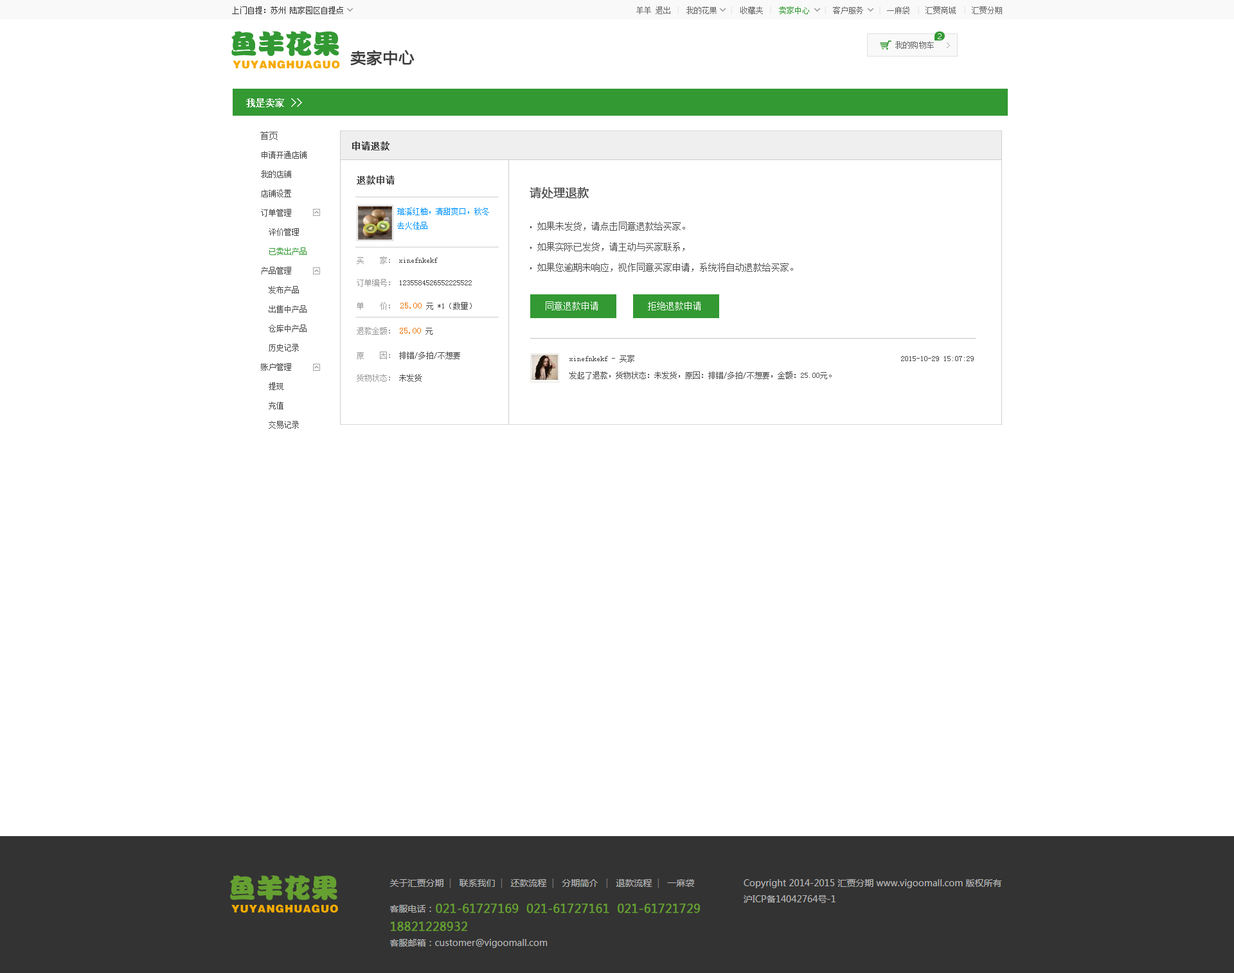
<style>
.page{position:relative;width:1234px;height:973px;background:#ffffff}
.page>*{position:absolute;margin:0}
.t1{font:9px "SimSun";color:#4b4b4b}
.t2{font:9px "SimSun";color:#3e3e3e;font-weight:bold}
.t3{font:7.7px/19.3px "SimSun";color:#4b4b4b}
.t4{font:7.7px/19.3px "SimSun";color:#339933}
.t5{font:9px "SimSun";color:#4b4b4b;font-weight:bold}
.t6{font:11.6px "MicrosoftYaHei";color:#4b4b4b;font-weight:bold}
.t7{font:7.7px/14.1px "SimSun";color:#0094ff}
.t8{font:9px/20.6px "SimSun";color:#4b4b4b}
.t9{font:11.6px/20.6px "AdobeHeitiStd-Regular";color:#4b4b4b}
.t10{font:7.7px/22.5px "SimSun";color:#4b4b4b}
.t11{font:7.7px/22.5px "SimSun";color:#9a9a9a}
.t12{font:7.7px/25.1px "SimSun";color:#9a9a9a}
.t13{font:9px/25.1px "SimSun";color:#ee7000}
.t14{font:7.7px/25.1px "SimSun";color:#4b4b4b}
.t15{font:9px "SimSun";color:#ffffff}
.t16{font:7.7px/16.7px "SimSun";color:#4b4b4b}
</style>
<div class="page">
<p class="t1" style="left:260px;top:131px;width:18px;height:9px">首页</p>
<p class="t2" style="left:352px;top:141px;width:38px;height:9px">申请退款</p>
<p class="t3" style="left:261px;top:151px;width:46px;height:278px">申请开通店铺<br>我的店铺<br>店铺设置<br>订单管理<br>  评价管理<br>  <span class="t4">已卖出产品<br></span>产品管理<br>  发布产品<br>  出售中产品<br>  仓库中产品<br>  历史记录<br>账户管理<br>  提现<br>  充值<br>  交易记录</p>
<p class="t5" style="left:357px;top:176px;width:38px;height:8px">退款申请</p>
<p class="t6" style="left:530px;top:187px;width:59px;height:12px">请处理退款</p>
<p class="t7" style="left:397px;top:208px;width:92px;height:22px">琯溪红柚，清甜爽口，秋冬<br>去火佳品</p>
<p class="t8" style="left:537px;top:222px;width:256px;height:50px">如果未发货，请点击同意退款给买家。<br>如果实际已发货，请主动与买家联系，<br>如果您逾期未响应，视作同意买家申请，系统将自动退款给买家。</p>
<p class="t9" style="left:530px;top:226px;width:2px;height:43px">.<br>.<br>.</p>
<p class="t10" style="left:357px;top:256px;width:115px;height:126px"><span class="t11">买    家：</span> xinefnkekf<br><span class="t11">订单编号：</span> 1235584526552225522<br><span class="t12">单    价： </span><span class="t13">25.00</span><span class="t14"> 元 *1（数量）<br></span><span class="t12">退款金额： </span><span class="t13">25.00 </span><span class="t14">元<br></span><span class="t11">原    因：</span> 排错/多拍/不想要<br><span class="t11">货物状态：</span> 未发货</p>
<p class="t15" style="left:546px;top:302px;width:52px;height:8px">同意退款申请</p>
<p class="t15" style="left:648px;top:302px;width:53px;height:8px">拒绝退款申请</p>
<p class="t16" style="left:570px;top:355px;width:404px;height:24px">xinefnkekf - 买家                                                                     2015-10-29 15:07:29<br>发起了退款，货物状态：未发货，原因：排错/多拍/不想要，金额：25.00元。</p>
</div>
